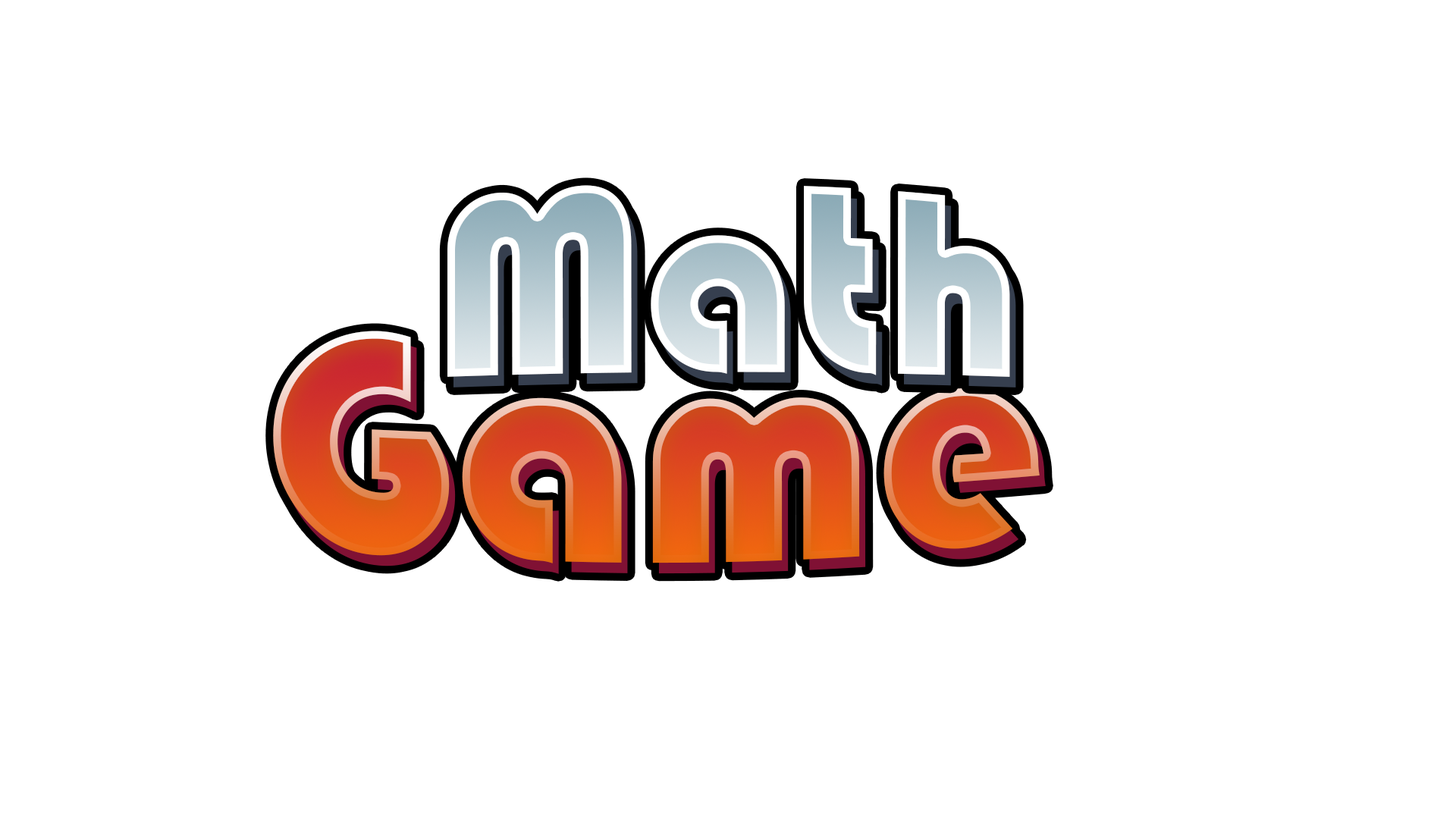
<style>
.page{position:relative;width:1456px;height:819px;background:#ffffff}
.page>*{position:absolute;margin:0}
.t1{font:259.4px "Bauhaus93"}
.t2{font:308.7px "Bauhaus93"}
</style>
<div class="page">
<p class="t1" style="left:447px;top:185px;width:563px;height:192px">Math</p>
<p class="t2" style="left:273px;top:331px;width:767px;height:232px">Game</p>
</div>
